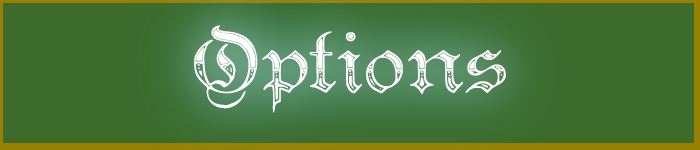
<style>
.page{position:relative;width:700px;height:150px;background:#3c6b2c}
.page>*{position:absolute;margin:0}
.t1{font:72px "TeutonicNo4-DemiBold";color:#ffffff}
</style>
<div class="page">
<p class="t1" style="left:194px;top:25px;width:312px;height:88px">Options</p>
</div>
